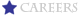
<style>
.page{position:relative;width:80px;height:15px;background:#ffffff}
.page>*{position:absolute;margin:0}
.t1{font:12px "CharlemagneStd-Bold";color:#cccccc}
</style>
<div class="page">
<p class="t1" style="left:20px;top:2px;width:58px;height:11px">Careers</p>
</div>
